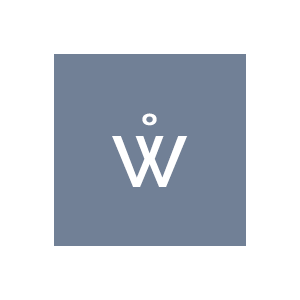
<style>
.page{position:relative;width:300px;height:300px;background:#ffffff}
.page>*{position:absolute;margin:0}
.t1{font:80px "Raleway-SemiBold";color:#ffffff;text-transform:uppercase}
.t2{font:72px "Raleway-SemiBold";color:#ffffff;text-transform:uppercase}
</style>
<div class="page">
<p class="t1" style="left:142px;top:113px;width:15px;height:13px">˚</p>
<p class="t2" style="left:112px;top:136px;width:76px;height:51px">W</p>
</div>
